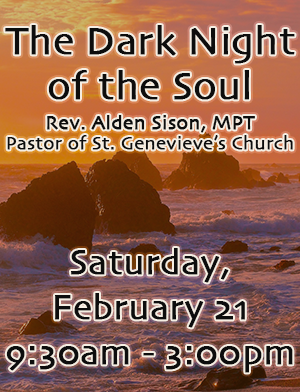
<style>
.page{position:relative;width:300px;height:392px}
.page>*{position:absolute;margin:0}
.t1{font:36px/45px "Skia-Regular";color:#0d0d0d;font-weight:bold}
.t2{font:40px/45px "Skia-Regular";color:#0d0d0d;font-weight:bold}
.t3{font:20px/20px "Skia-Regular";color:#0d0d0d;font-weight:bold}
.t4{font:19px/20px "Skia-Regular";color:#0d0d0d;font-weight:bold}
</style>
<div class="page">
<p class="t1" style="left:5px;top:25px;width:290px;height:348px;text-align:center"><span class="t2">The Dark Night of the Soul<br><br></span><span class="t3">Rev. Alden Sison, MPT <br></span><span class="t4">Pastor of St. Genevieve’s Church<br><br><br><br><br></span>Saturday, February 21<br>9:30am - 3:00pm</p>
</div>
